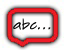
<style>
.page{position:relative;width:65px;height:50px;background:#ffffff}
.page>*{position:absolute;margin:0}
.t1{font:13.3px "SketchFlowPrint";color:#000000}
</style>
<div class="page">
<p class="t1" style="left:13px;top:18px;width:38px;height:12px">abc...</p>
</div>
